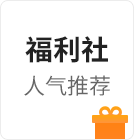
<style>
.page{position:relative;width:134px;height:140px;background:#ffffff}
.page>*{position:absolute;margin:0}
.t1{font:28px "SourceHanSansCN-Bold";color:#222222}
.t2{font:22px "SourceHanSansCN-Regular";color:#666666}
</style>
<div class="page">
<p class="t1" style="left:25px;top:36px;width:83px;height:27px">福利社</p>
<p class="t2" style="left:24px;top:75px;width:86px;height:21px">人气推荐</p>
</div>
